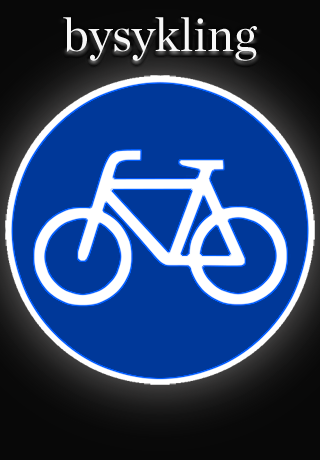
<style>
.page{position:relative;width:320px;height:460px;background:#003899}
.page>*{position:absolute;margin:0}
.t1{font:48px "ChronicleDeck-Roman";color:#f7f7f7}
</style>
<div class="page">
<p class="t1" style="left:63px;top:17px;width:194px;height:44px">bysykling</p>
</div>
